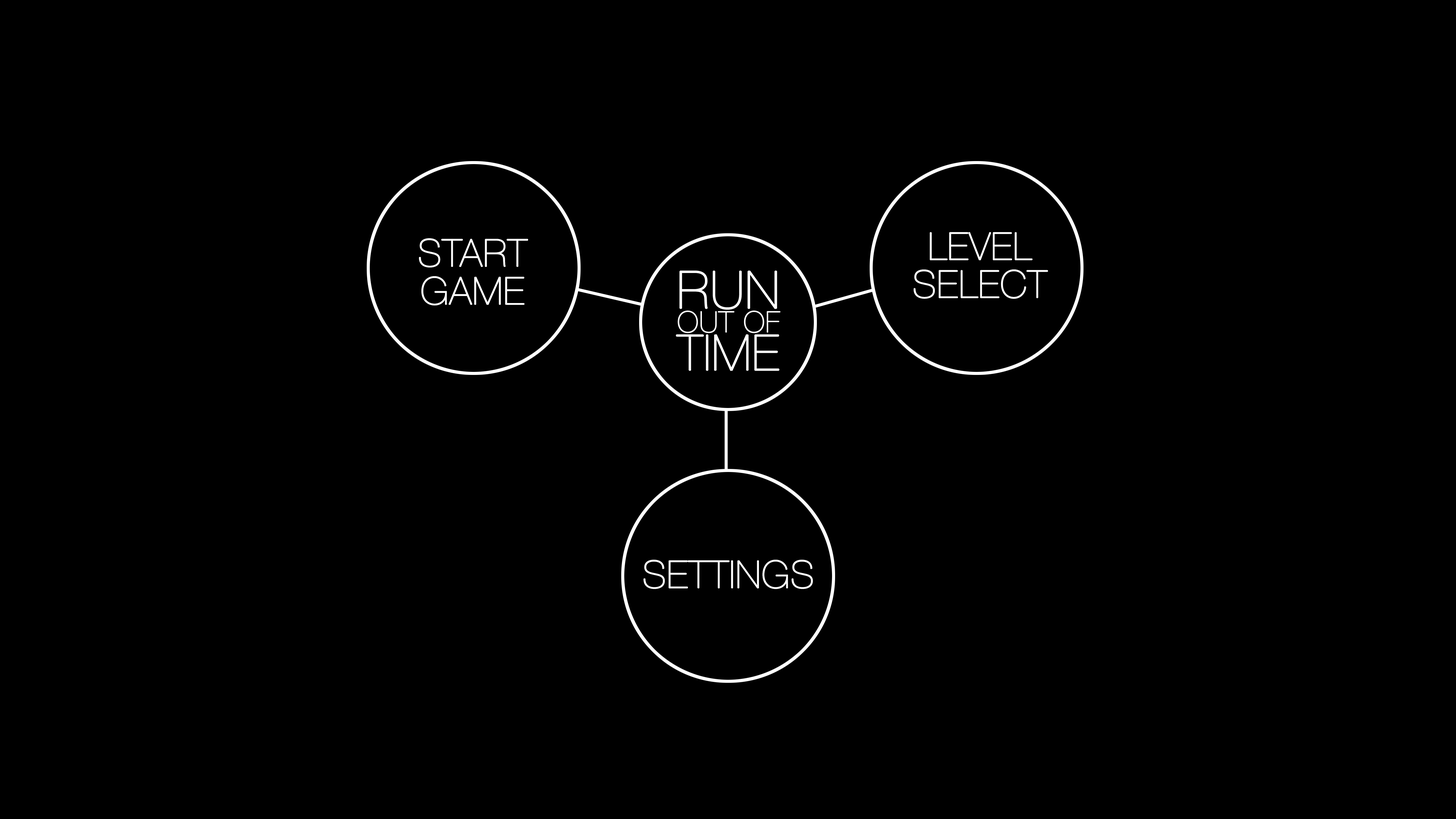
<style>
.page{position:relative;width:1456px;height:819px;background:#000000}
.page>*{position:absolute;margin:0}
.t1{font:37.9px/37.9px "HelveticaNeueCyr-UltraLight";letter-spacing:0.01em;color:#ffffff;font-weight:bold}
.t2{font:37.9px "HelveticaNeueCyr-UltraLight";letter-spacing:0.01em;color:#ffffff;font-weight:bold}
</style>
<div class="page">
<p class="t1" style="left:914px;top:232px;width:134px;height:67px;text-align:center">LEVEL<br>SELECT</p>
<p class="t1" style="left:419px;top:238px;width:109px;height:67px;text-align:center">START<br>GAME</p>
<p class="t2" style="left:643px;top:560px;width:170px;height:29px">SETTINGS</p>
</div>
